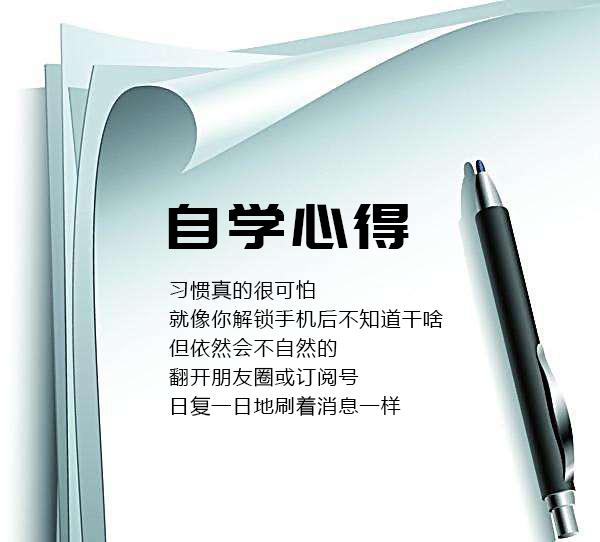
<style>
.page{position:relative;width:600px;height:542px;background:#ffffff}
.page>*{position:absolute;margin:0}
.t1{font:63.4px "PangMenZhengDao";letter-spacing:0.04em;color:#000000}
.t2{font:14px "MicrosoftYaHei";letter-spacing:0.04em;color:#000000}
.t3{font:20.4px/29px "MicrosoftYaHei";letter-spacing:0.04em;color:#000000}
</style>
<div class="page">
<p class="t1" style="left:168px;top:204px;width:241px;height:45px"><span class="t2"><br></span>自学心得</p>
<p class="t3" style="left:169px;top:280px;width:274px;height:136px">习惯真的很可怕<br>就像你解锁手机后不知道干啥<br>但依然会不自然的<br>翻开朋友圈或订阅号<br>日复一日地刷着消息一样</p>
</div>
